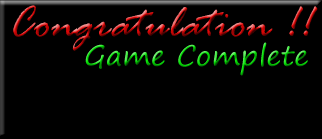
<style>
.page{position:relative;width:322px;height:139px;background:#000000}
.page>*{position:absolute;margin:0}
.t1{font:48px "RageItalic"}
.t2{font:28px "SegoePrint"}
</style>
<div class="page">
<p class="t1" style="left:13px;top:5px;width:305px;height:46px">Congratulation !!</p>
<p class="t2" style="left:85px;top:42px;width:223px;height:34px">Game Complete</p>
</div>
